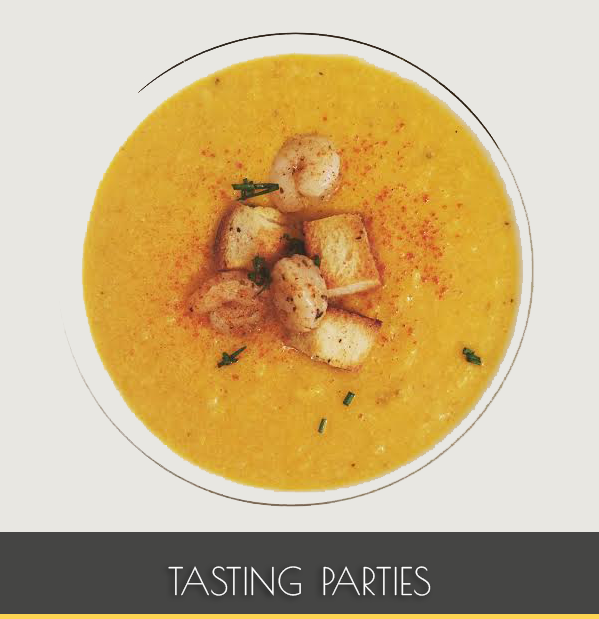
<style>
.page{position:relative;width:599px;height:619px;background:#e8e7e2}
.page>*{position:absolute;margin:0}
.t1{font:53.3px "PoiretOne-Regular";color:#ffffff;font-variant:small-caps}
</style>
<div class="page">
<p class="t1" style="left:168px;top:566px;width:263px;height:30px">tasting parties</p>
</div>
